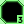
<style>
.page{position:relative;width:24px;height:24px;background:#000000}
.page>*{position:absolute;margin:0}
.t1{font:9px "Montserrat-Bold";color:#000000}
</style>
<div class="page">
<p class="t1" style="left:18px;top:16px;width:5px;height:7px">3</p>
</div>
